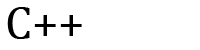
<style>
.page{position:relative;width:200px;height:50px;background:#ffffff}
.page>*{position:absolute;margin:0}
.t1{font:48px "Cambria";color:#000000}
</style>
<div class="page">
<p class="t1" style="left:7px;top:7px;width:75px;height:32px">C++</p>
</div>
